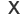
<style>
.page{position:relative;width:27px;height:27px;background:#ffffff}
.page>*{position:absolute;margin:0}
.t1{font:24px "ArialMT";color:#303030}
</style>
<div class="page">
<p class="t1" style="left:8px;top:1px;width:12px;height:13px">x</p>
</div>
